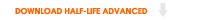
<style>
.page{position:relative;width:200px;height:20px;background:#ffffff}
.page>*{position:absolute;margin:0}
.t1{font:8px "Atlanta-Demi";color:#ff6600}
</style>
<div class="page">
<p class="t1" style="left:15px;top:7px;width:133px;height:8px">DOWNLOAD HALF-LIFE ADVANCED</p>
</div>
